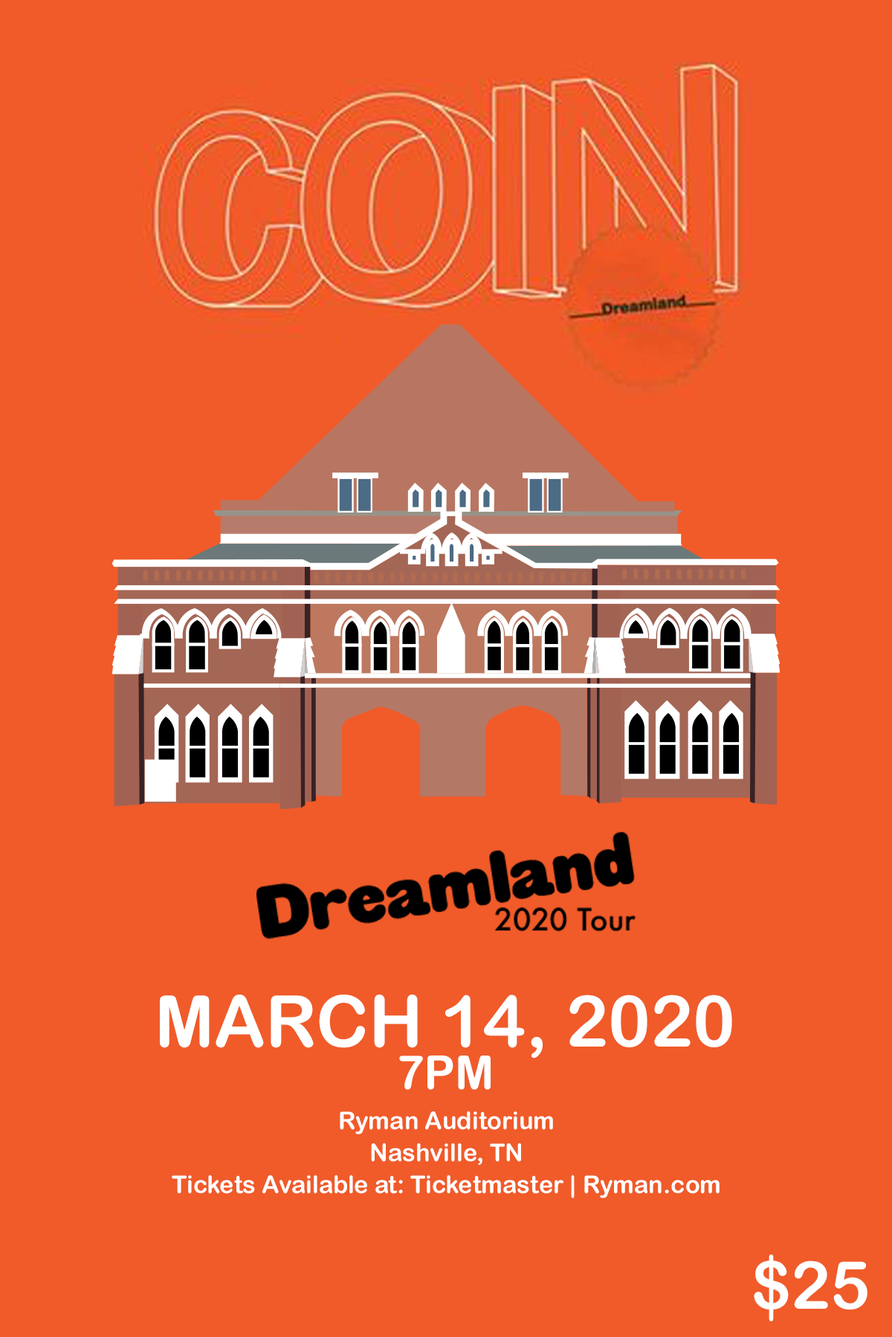
<style>
.page{position:relative;width:892px;height:1337px;background:#f05b29}
.page>*{position:absolute;margin:0}
.t1{font:71.3px/54.9px "ArialRoundedMTBold";color:#ffffff}
.t2{font:46.6px/42.5px "ArialRoundedMTBold";color:#ffffff}
.t3{font:24.2px/32px "ArialRoundedMTBold";color:#ffffff}
.t4{font:66.4px "ArialRoundedMTBold";color:#ffffff}
</style>
<div class="page">
<p class="t1" style="left:160px;top:995px;width:572px;height:95px;text-align:center">MARCH 14, 2020<br><span class="t2">7PM</span></p>
<p class="t3" style="left:172px;top:1112px;width:547px;height:86px;text-align:center">Ryman Auditorium<br>Nashville, TN<br>Tickets Available at: Ticketmaster | Ryman.com</p>
<p class="t4" style="left:753px;top:1255px;width:114px;height:67px">$25</p>
</div>
